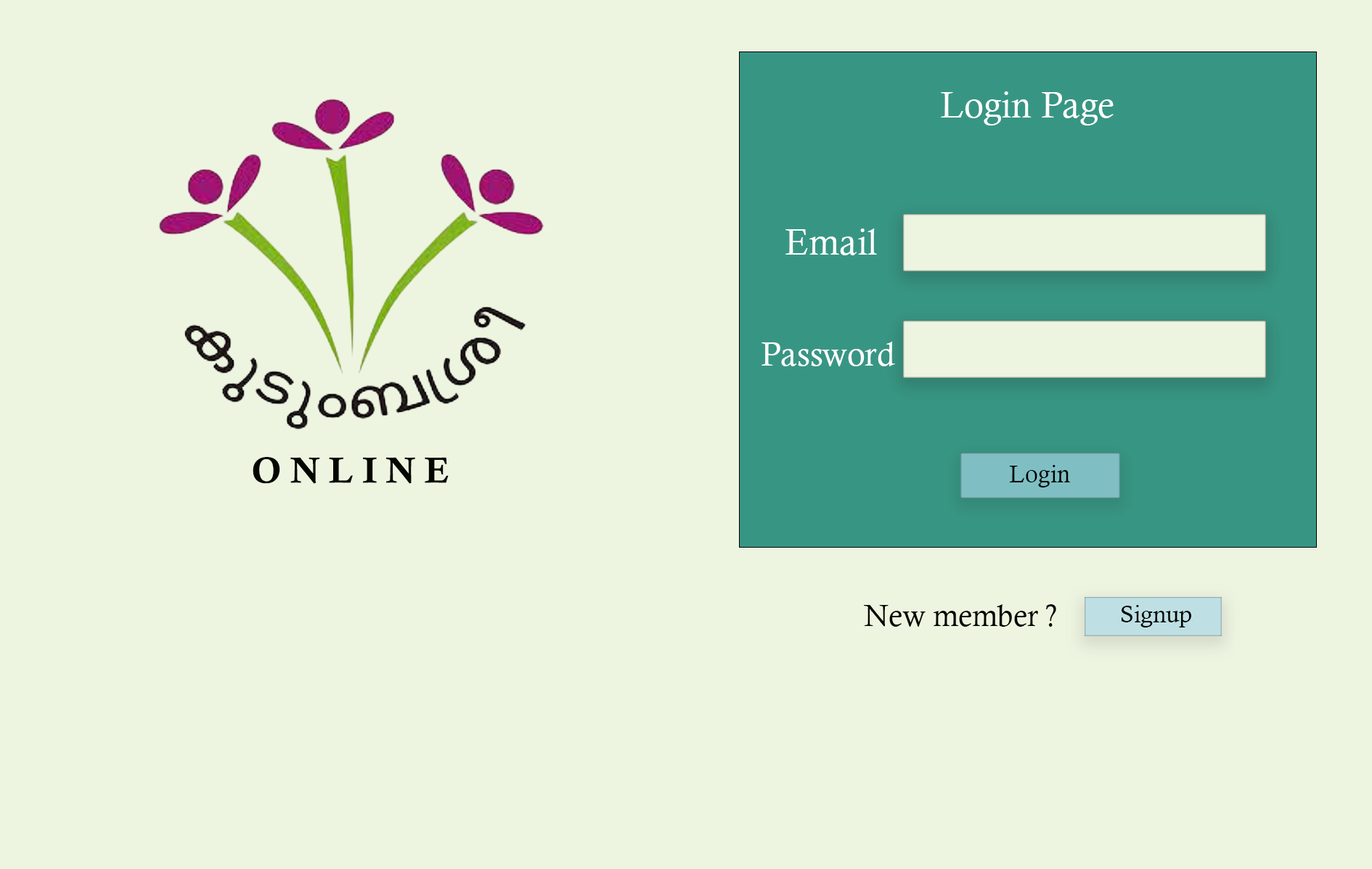
<style>
.page{position:relative;width:1372px;height:869px;background:#edf5e1}
.page>*{position:absolute;margin:0}
.t1{font:36.3px "CalistoMT";color:#ffffff}
.t2{font:33.3px "CalistoMT";color:#ffffff}
.t3{font:36.3px "CalisMTBol";letter-spacing:0.26em;color:#040600}
.t4{font:24.2px "CalistoMT";color:#000000}
.t5{font:30.2px "CalistoMT";color:#040600}
.t6{font:24.4px "CalistoMT";color:#040600}
</style>
<div class="page">
<p class="t1" style="left:941px;top:91px;width:172px;height:35px">Login Page</p>
<p class="t1" style="left:784px;top:229px;width:93px;height:26px">Email</p>
<p class="t2" style="left:761px;top:342px;width:134px;height:24px">Password</p>
<p class="t3" style="left:253px;top:457px;width:195px;height:27px">ONLINE</p>
<p class="t4" style="left:1009px;top:465px;width:61px;height:23px">Login</p>
<p class="t5" style="left:864px;top:605px;width:192px;height:22px">New member ?</p>
<p class="t6" style="left:1120px;top:605px;width:71px;height:23px">Signup</p>
</div>
